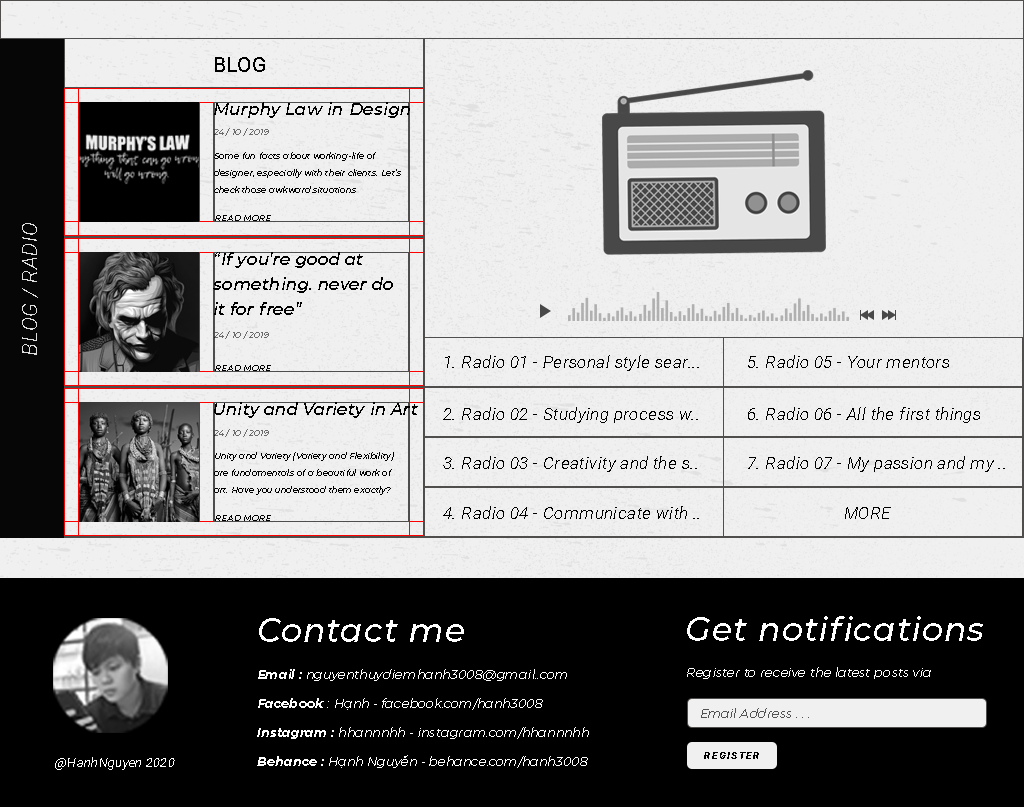
<style>
.page{position:relative;width:1024px;height:807px;background:#f0f0f0}
.page>*{position:absolute;margin:0}
.t1{font:20.8px "Roboto-Regular";letter-spacing:0.025em;color:#000000}
.t2{font:16.7px "Montserrat-MediumItalic";letter-spacing:0.025em;color:#000000}
.t3{font:8.3px "Montserrat-ExtraLightItalic";letter-spacing:0.025em;color:#6c6c6c}
.t4{font:8.3px/16.7px "Montserrat-LightItalic";letter-spacing:0.025em;color:#000000}
.t5{font:8.3px "Montserrat-Italic";letter-spacing:0.025em;color:#000000}
.t6{font:20.8px "Roboto-LightItalic";letter-spacing:0.025em;color:#dedede}
.t7{font:16.7px/25px "Montserrat-MediumItalic";letter-spacing:0.025em;color:#000000}
.t8{font:16.7px "Roboto-LightItalic";letter-spacing:0.025em;color:#000000}
.t9{font:33.3px "Montserrat-MediumItalic";letter-spacing:0.025em;color:#ffffff}
.t10{font:12.5px/29.2px "Montserrat-LightItalic";letter-spacing:0.025em;color:#ffffff}
.t11{font:12.5px/29.2px "Montserrat-BoldItalic";letter-spacing:0.025em;color:#ffffff}
.t12{font:12.5px "Montserrat-LightItalic";letter-spacing:0.025em;color:#ffffff}
.t13{font:12.5px "Montserrat-LightItalic";letter-spacing:0.025em;color:#525252}
.t14{font:12.5px "Roboto-ThinItalic";letter-spacing:0.025em;color:#ffffff}
.t15{font:10.4px "Roboto-BlackItalic";letter-spacing:0.1em;color:#000000;text-transform:uppercase}
</style>
<div class="page">
<p class="t1" style="left:215px;top:57px;width:50px;height:15px">BLOG</p>
<p class="t2" style="left:214px;top:102px;width:196px;height:16px">Murphy Law in Design</p>
<p class="t3" style="left:214px;top:128px;width:55px;height:8px">24 / 10 / 2019</p>
<p class="t4" style="left:214px;top:152px;width:187px;height:41px">Some fun facts about working-life of designer, especially with their clients. Let’s check those awkward situations</p>
<p class="t5" style="left:215px;top:215px;width:56px;height:6px">READ MORE</p>
<p class="t6" style="left:22px;top:223px;width:16px;height:132px;rotate:-90deg">BLOG / RADIO</p>
<p class="t7" style="left:213px;top:252px;width:180px;height:63px">“If you’re good at <br>something. never do <br>it for free”</p>
<p class="t3" style="left:214px;top:331px;width:55px;height:8px">24 / 10 / 2019</p>
<p class="t5" style="left:215px;top:365px;width:56px;height:6px">READ MORE</p>
<p class="t8" style="left:445px;top:355px;width:254px;height:16px">1. Radio 01 - Personal style sear...</p>
<p class="t8" style="left:748px;top:355px;width:201px;height:13px">5. Radio 05 - Your mentors</p>
<p class="t2" style="left:214px;top:402px;width:204px;height:16px">Unity and Variety in Art</p>
<p class="t8" style="left:443px;top:407px;width:255px;height:16px">2. Radio 02 - Studying process w..</p>
<p class="t8" style="left:748px;top:407px;width:232px;height:16px">6. Radio 06 - All the first things</p>
<p class="t3" style="left:214px;top:429px;width:55px;height:8px">24 / 10 / 2019</p>
<p class="t4" style="left:214px;top:452px;width:180px;height:43px">Unity and Variety (Variety and Flexibility) are fundamentals of a beautiful work of art. Have you understood them exactly?</p>
<p class="t8" style="left:443px;top:456px;width:254px;height:16px">3. Radio 03 - Creativity and the s..</p>
<p class="t8" style="left:748px;top:456px;width:257px;height:16px">7. Radio 07 - My passion and my ..</p>
<p class="t8" style="left:443px;top:506px;width:256px;height:13px">4. Radio 04 - Communicate with ..</p>
<p class="t8" style="left:845px;top:507px;width:46px;height:12px">MORE</p>
<p class="t5" style="left:215px;top:515px;width:56px;height:6px">READ MORE</p>
<p class="t9" style="left:687px;top:616px;width:296px;height:25px">Get notifications</p>
<p class="t9" style="left:259px;top:618px;width:205px;height:24px">Contact me</p>
<p class="t10" style="left:257px;top:669px;width:332px;height:99px"><span class="t11">Email :</span> nguyenthuydiemhanh3008@gmail..com<br><span class="t11">Facebook </span>: Hạnh - facebook.com/hanh3008<br><span class="t11">Instagram :</span> hhannnhh - instagram.com/hhannnhh<br><span class="t11">Behance :</span> Hạnh Nguyễn - behance.com/hanh3008</p>
<p class="t12" style="left:687px;top:667px;width:244px;height:12px">Register to receive the latest posts via Email</p>
<p class="t13" style="left:701px;top:708px;width:108px;height:10px">Email Address . . .</p>
<p class="t14" style="left:55px;top:757px;width:120px;height:13px">@HanhNguyen 2020</p>
<p class="t15" style="left:704px;top:752px;width:55px;height:7px">register</p>
</div>
